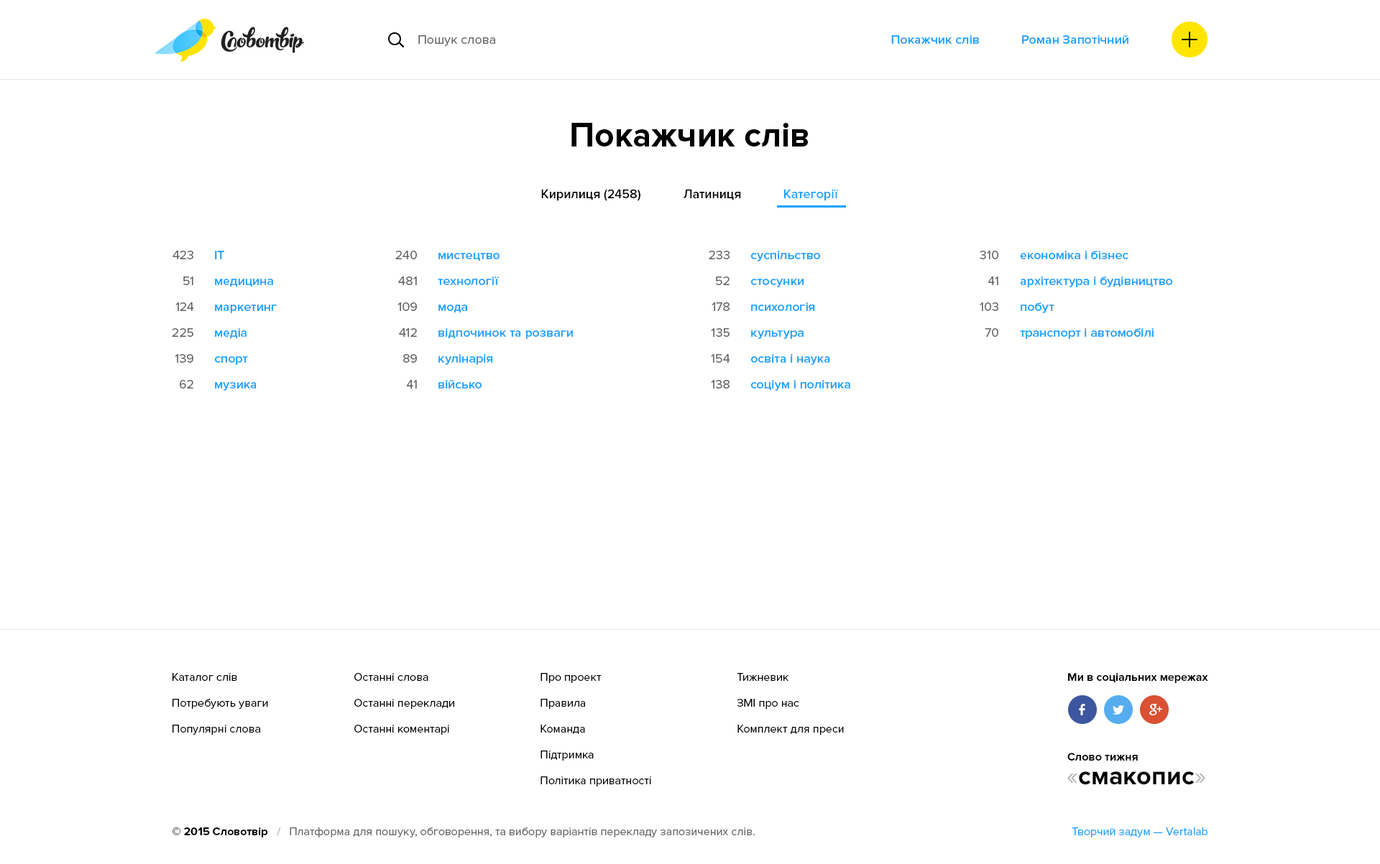
<style>
.page{position:relative;width:1380px;height:864px;background:#ffffff}
.page>*{position:absolute;margin:0}
.t1{font:12.9px "ProximaNova-Regular";color:#666666}
.t2{font:12.9px "ProximaNova-Semibold";color:#17a2ff}
.t3{font:34.5px "ProximaNova-Bold";color:#000000}
.t4{font:12.9px "ProximaNova-Semibold";color:#000000}
.t5{font:12.9px/25.9px "ProximaNova-Regular";color:#666666}
.t6{font:12.9px/25.9px "ProximaNova-Semibold";color:#17a2ff}
.t7{font:11.5px/25.9px "ProximaNova-Regular";color:#000000}
.t8{font:11.5px/25.9px "ProximaNova-Regular";color:#010101}
.t9{font:11.5px "ProximaNova-Bold";color:#010101}
.t10{font:25.9px "ProximaNova-Bold";color:#000000}
.t11{font:25.9px "ProximaNova-Regular";color:#b3b3b3}
.t12{font:11.5px "ProximaNova-Regular";color:#666666}
.t13{font:11.5px "ProximaNova-Bold";color:#000000}
.t14{font:11.5px "ProximaNova-Bold";color:#bfbfbf}
.t15{font:11.5px "ProximaNova-Regular";color:#17a2ff}
</style>
<div class="page">
<p class="t1" style="left:418px;top:35px;width:77px;height:11px">Пошук слова</p>
<p class="t2" style="left:891px;top:35px;width:88px;height:9px">Покажчик слів</p>
<p class="t2" style="left:1022px;top:35px;width:106px;height:9px">Роман Запотічний</p>
<p class="t3" style="left:571px;top:123px;width:237px;height:24px">Покажчик слів</p>
<p class="t4" style="left:541px;top:189px;width:99px;height:12px">Кирилиця (2458)</p>
<p class="t4" style="left:683px;top:189px;width:58px;height:11px">Латиниця</p>
<p class="t2" style="left:784px;top:189px;width:55px;height:12px">Категорії</p>
<p class="t5" style="left:172px;top:251px;width:22px;height:138px;text-align:right">423<br>51<br>124<br>225<br>139<br>62</p>
<p class="t6" style="left:214px;top:251px;width:63px;height:140px">IT<br>медицина<br>маркетинг<br>медіа<br>спорт<br>музика</p>
<p class="t5" style="left:395px;top:251px;width:22px;height:138px;text-align:right">240<br>481<br>109<br>412<br>89<br>41</p>
<p class="t6" style="left:438px;top:253px;width:135px;height:136px">мистецтво<br>технології<br>мода<br>відпочинок та розваги<br>кулінарія<br>військо</p>
<p class="t5" style="left:708px;top:251px;width:22px;height:138px;text-align:right">233<br>52<br>178<br>135<br>154<br>138</p>
<p class="t6" style="left:750px;top:251px;width:100px;height:140px">суспільство<br>стосунки<br>психологія<br>культура<br>освіта і наука<br>соціум і політика</p>
<p class="t5" style="left:979px;top:251px;width:19px;height:86px;text-align:right">310<br>41<br>103<br>70</p>
<p class="t6" style="left:1020px;top:251px;width:153px;height:88px">економіка і бізнес<br>архітектура і будівництво<br>побут<br>транспорт і автомобілі</p>
<p class="t7" style="left:172px;top:673px;width:96px;height:62px">Каталог слів<br>Потребують уваги<br>Популярні слова</p>
<p class="t7" style="left:354px;top:673px;width:100px;height:62px">Останні слова<br>Останні переклади<br>Останні коментарі</p>
<p class="t7" style="left:540px;top:673px;width:111px;height:114px">Про проект<br>Правила<br>Команда<br>Підтримка<br>Політика приватності</p>
<p class="t8" style="left:736px;top:673px;width:108px;height:62px">Тижневик<br>ЗМІ про нас<br>Комплект для преси</p>
<p class="t9" style="left:1068px;top:673px;width:140px;height:10px">Ми в соціальних мережах</p>
<p class="t9" style="left:1067px;top:753px;width:70px;height:8px">Слово тижня</p>
<p class="t10" style="left:1067px;top:772px;width:138px;height:13px"><span class="t11">«</span>смакопис<span class="t11">»</span></p>
<p class="t12" style="left:172px;top:828px;width:582px;height:10px"><span class="t13">© 2015 Словотвір   </span><span class="t14">/   </span>Платформа для пошуку, обговорення, та вибору варіантів перекладу запозичених слів.</p>
<p class="t15" style="left:1071px;top:828px;width:136px;height:10px">Творчий задум — Vertalab</p>
</div>
